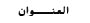
<style>
.page{position:relative;width:90px;height:23px;background:#ffffff}
.page>*{position:absolute;margin:0}
.t1{font:12px "BoutrosAdsMedium";color:#0c0b0b}
</style>
<div class="page">
<p class="t1" style="left:18px;top:6px;width:51px;height:10px">العنــوان</p>
</div>
